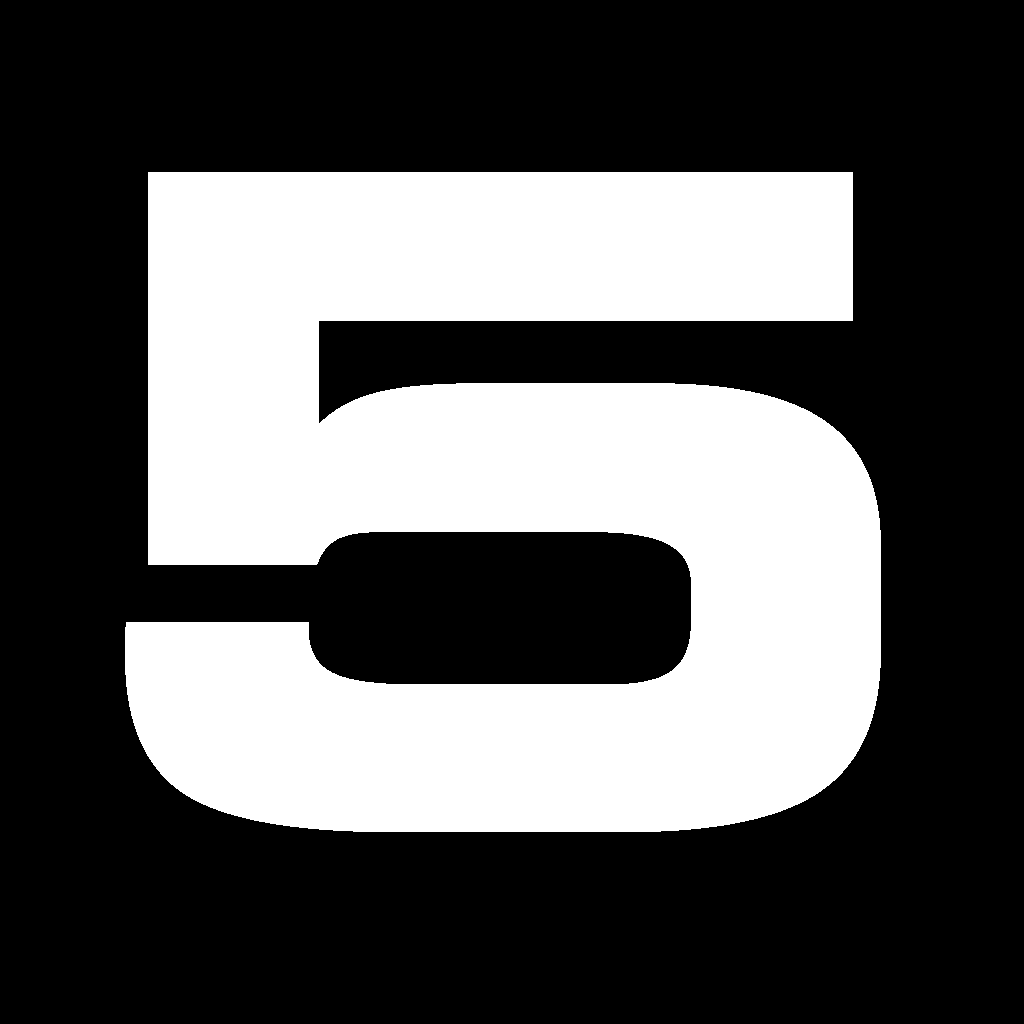
<style>
.page{position:relative;width:1024px;height:1024px;background:#000000}
.page>*{position:absolute;margin:0}
.t1{font:895.8px "Square721BT-BoldExtended";color:#ffffff}
</style>
<div class="page">
<p class="t1" style="left:125px;top:172px;width:756px;height:660px">5</p>
</div>
